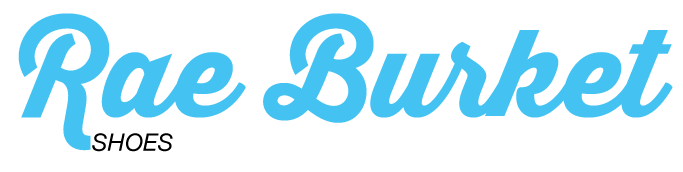
<style>
.page{position:relative;width:683px;height:172px;background:#ffffff}
.page>*{position:absolute;margin:0}
.t1{font:120px "ThirstyScriptExtraboldDemo";color:#44c3f2}
.t2{font:24px "HelveticaNeue-Italic";color:#000000}
</style>
<div class="page">
<p class="t1" style="left:18px;top:13px;width:655px;height:138px">Rae Burket</p>
<p class="t2" style="left:92px;top:133px;width:81px;height:19px">SHOES</p>
</div>
